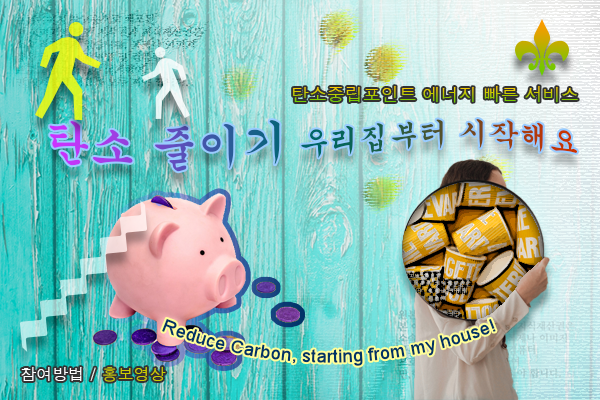
<style>
.page{position:relative;width:600px;height:400px}
.page>*{position:absolute;margin:0}
.t1{font:18px "Dotum"}
.t2{font:30px "Gungsuh"}
.t3{font:46px "Gungsuh"}
.t4{font:18px "ArialMT";color:#003366}
.t5{font:16px "Dotum";color:#ffffff}
.t6{font:16px "Dotum";color:#cccc00}
</style>
<div class="page">
<p class="t1" style="left:293px;top:86px;width:285px;height:17px">탄소중립포인트 에너지 빠른 서비스</p>
<p class="t2" style="left:49px;top:119px;width:529px;height:53px"><span class="t3">탄소 줄이기</span> 우리집부터 시작해요</p>
<p class="t4" style="left:162px;top:318px;width:334px;height:48px">Reduce Carbon, starting from my house!</p>
<p class="t5" style="left:21px;top:367px;width:145px;height:15px">참여방법 / <span class="t6">홍보영상</span></p>
</div>
